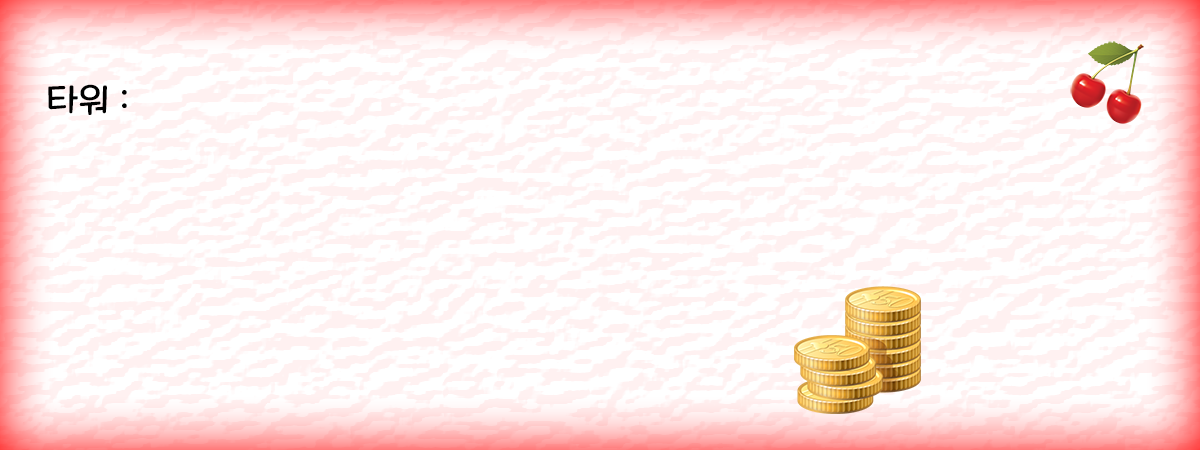
<style>
.page{position:relative;width:1200px;height:450px;background:#ffffff}
.page>*{position:absolute;margin:0}
.t1{font:36px "MaplestoryLight";color:#000000}
</style>
<div class="page">
<p class="t1" style="left:48px;top:84px;width:79px;height:31px">타워 :</p>
</div>
